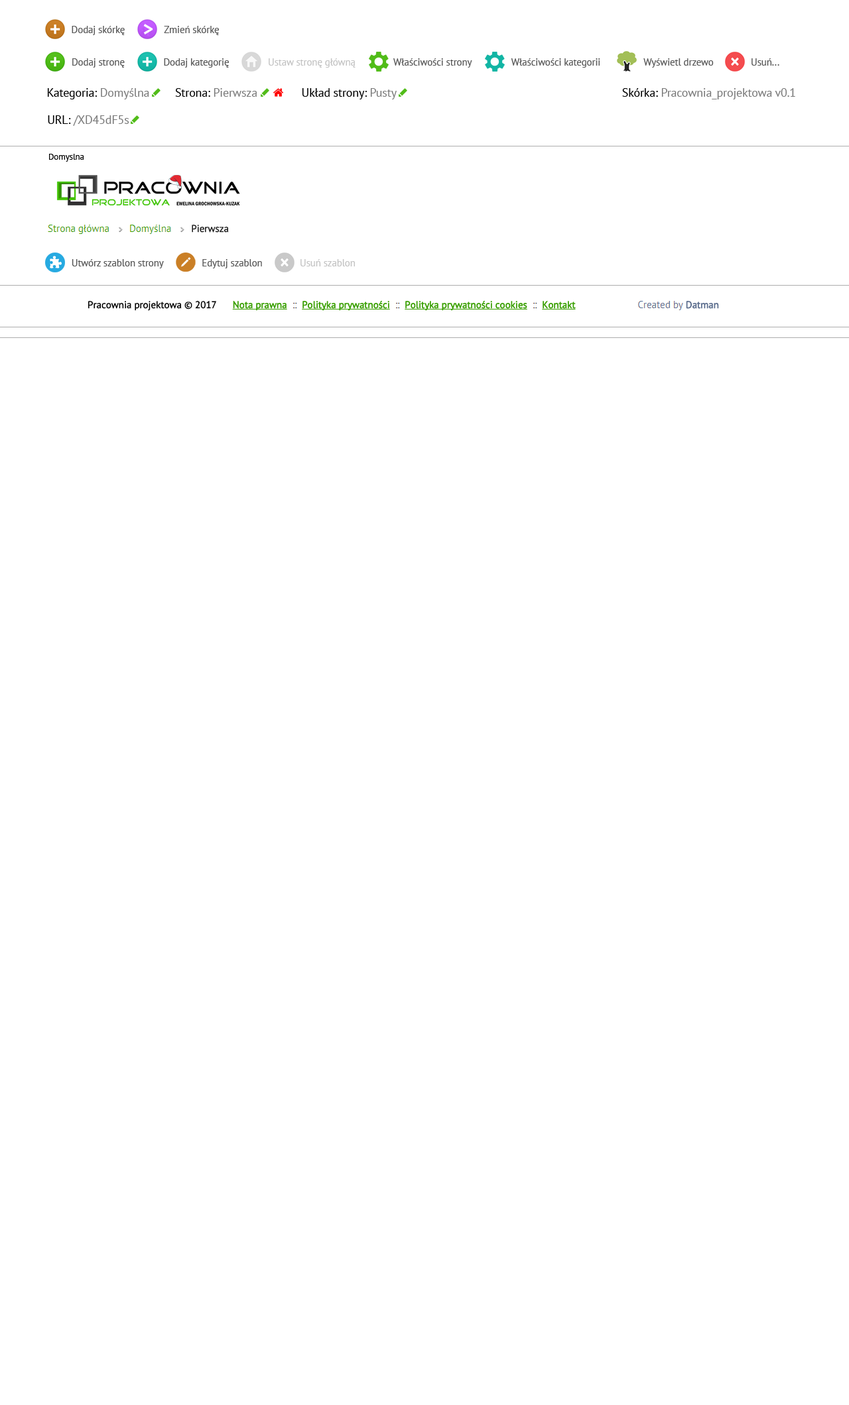
<style>
.page{position:relative;width:849px;height:1405px;background:#ffffff}
.page>*{position:absolute;margin:0}
.t1{font:9.9px "PTSans-Regular";letter-spacing:-0.01em;color:#585858}
.t2{font:19.9px "PTSans-Bold";letter-spacing:-0.01em;color:#ffffff}
.t3{font:9.9px "PTSans-Regular";letter-spacing:-0.01em;color:#c3c3c3}
.t4{font:11.9px "PTSans-Regular";letter-spacing:-0.01em;color:#000000}
.t5{font:11.9px "PTSans-Regular";letter-spacing:-0.01em;color:#7a7a7a}
.t6{font:8.6px "PTSans-Regular";letter-spacing:-0.01em;color:#000000}
</style>
<div class="page">
<p class="t1" style="left:72px;top:26px;width:53px;height:9px">Dodaj skórkę</p>
<p class="t2" style="left:143px;top:24px;width:10px;height:10px">&gt;</p>
<p class="t1" style="left:164px;top:26px;width:55px;height:9px">Zmień skórkę</p>
<p class="t1" style="left:72px;top:58px;width:53px;height:10px">Dodaj stronę</p>
<p class="t1" style="left:164px;top:58px;width:65px;height:10px">Dodaj kategorię</p>
<p class="t3" style="left:268px;top:58px;width:87px;height:10px">Ustaw stronę główną</p>
<p class="t1" style="left:393px;top:58px;width:79px;height:10px">Właściwości strony</p>
<p class="t1" style="left:510px;top:58px;width:90px;height:10px">Właściwości kategorii</p>
<p class="t1" style="left:643px;top:58px;width:70px;height:10px">Wyświetl drzewo</p>
<p class="t1" style="left:751px;top:58px;width:28px;height:8px">Usuń...</p>
<p class="t4" style="left:47px;top:88px;width:102px;height:11px">Kategoria: <span class="t5">Domyślna</span></p>
<p class="t5" style="left:175px;top:88px;width:82px;height:9px"><span class="t4">Strona: </span>Pierwsza</p>
<p class="t4" style="left:302px;top:88px;width:94px;height:11px">Układ strony: <span class="t5">Pusty</span></p>
<p class="t5" style="left:622px;top:88px;width:173px;height:11px"><span class="t4">Skórka: </span>Pracownia_projektowa v0.1</p>
<p class="t5" style="left:48px;top:115px;width:81px;height:11px"><span class="t4">URL: </span>/XD45dF5s</p>
<p class="t6" style="left:49px;top:154px;width:35px;height:8px">Domyslna</p>
<p class="t1" style="left:72px;top:259px;width:92px;height:9px">Utwórz szablon strony</p>
<p class="t1" style="left:202px;top:259px;width:60px;height:9px">Edytuj szablon</p>
<p class="t3" style="left:300px;top:259px;width:55px;height:7px">Usuń szablon</p>
</div>
